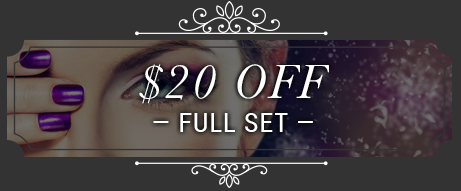
<style>
.page{position:relative;width:461px;height:191px;background:#333333}
.page>*{position:absolute;margin:0}
.t1{font:50px "Baskerville-Italic";letter-spacing:0.04em;color:#ffffff}
.t2{font:27.2px "RobotoCondensed-Regular";letter-spacing:0.04em;color:#ffffff;text-transform:uppercase}
</style>
<div class="page">
<p class="t1" style="left:139px;top:64px;width:190px;height:40px">$20 OFF</p>
<p class="t2" style="left:153px;top:113px;width:160px;height:19px">— Full Set —</p>
</div>
